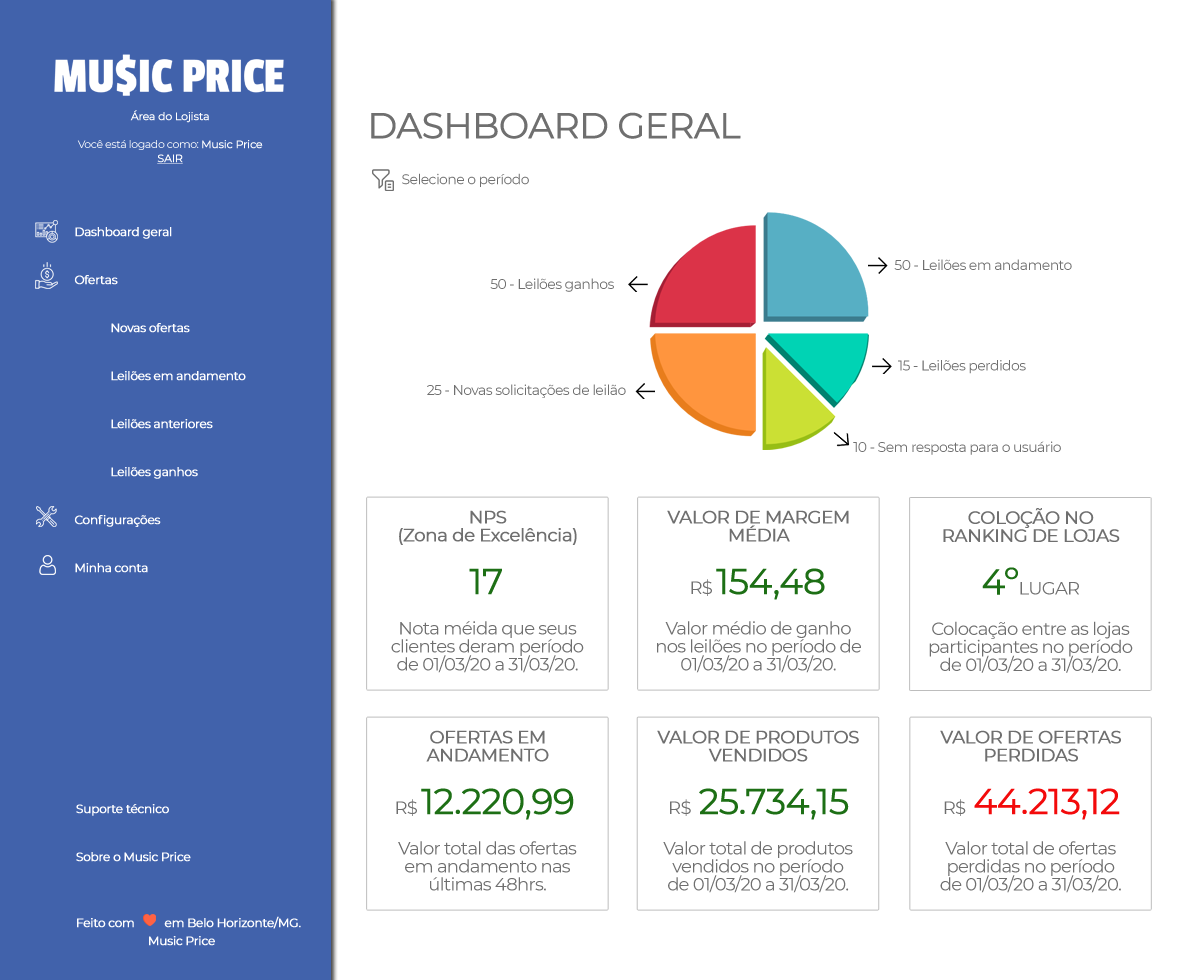
<style>
.page{position:relative;width:1200px;height:980px;background:#ffffff}
.page>*{position:absolute;margin:0}
.t1{font:11px/14px "Montserrat-Regular";letter-spacing:-0.04em;color:#ffffff}
.t2{font:11px/14px "Montserrat-Regular";letter-spacing:-0.04em;color:#ffffff;font-weight:bold}
.t3{font:11px/14px "Montserrat-Regular";letter-spacing:-0.04em;color:#ffffff;font-weight:bold;text-decoration:underline}
.t4{font:36px "Montserrat-Regular";letter-spacing:-0.04em;color:#6f6f6f;font-weight:bold}
.t5{font:14px "Montserrat-Regular";letter-spacing:-0.04em;color:#6f6f6f}
.t6{font:12px/48px "Montserrat-Regular";letter-spacing:-0.04em;color:#ffffff;font-weight:bold}
.t7{font:18px/18px "Montserrat-Regular";letter-spacing:-0.04em;color:#6f6f6f;font-weight:bold}
.t8{font:36px "Montserrat-Regular";letter-spacing:-0.04em;color:#1d6f15;font-weight:bold}
.t9{font:18px "Montserrat-Regular";letter-spacing:-0.04em;color:#6f6f6f}
.t10{font:18px/18px "Montserrat-Regular";letter-spacing:-0.04em;color:#6f6f6f}
.t11{font:36px "Montserrat-Regular";letter-spacing:-0.04em;color:#f30a0b;font-weight:bold}
.t12{font:12px/18px "Montserrat-Regular";letter-spacing:-0.04em;color:#ffffff;font-weight:bold}
</style>
<div class="page">
<p class="t1" style="left:77px;top:110px;width:186px;height:54px;text-align:center"><span class="t2">Área do Lojista<br><br></span>Você está logado como: <span class="t2">Music Price<br></span><span class="t3">SAIR</span></p>
<p class="t4" style="left:371px;top:112px;width:370px;height:27px">DASHBOARD GERAL</p>
<p class="t5" style="left:402px;top:173px;width:127px;height:14px">Selecione o período</p>
<p class="t6" style="left:74px;top:227px;width:172px;height:346px">Dashboard geral<br>Ofertas<br> Novas ofertas<br> Leilões em andamento<br> Leilões anteriores<br> Leilões ganhos<br>Configurações<br>Minha conta</p>
<p class="t5" style="left:894px;top:259px;width:178px;height:11px">50 - Leilões em andamento</p>
<p class="t5" style="left:490px;top:278px;width:124px;height:14px">50 - Leilões ganhos</p>
<p class="t5" style="left:898px;top:360px;width:128px;height:14px">15 - Leilões perdidos</p>
<p class="t5" style="left:427px;top:384px;width:199px;height:14px">25 - Novas solicitações de leilão</p>
<p class="t5" style="left:853px;top:441px;width:208px;height:14px">10 - Sem resposta para o usuário</p>
<p class="t7" style="left:399px;top:510px;width:178px;height:35px;text-align:center">NPS<br>(Zona de Excelência)</p>
<p class="t7" style="left:667px;top:510px;width:182px;height:32px;text-align:center">VALOR DE MARGEM<br>MÉDIA</p>
<p class="t7" style="left:943px;top:508px;width:177px;height:34px;text-align:center">COLOÇÃO NO<br>RANKING DE LOJAS</p>
<p class="t8" style="left:469px;top:568px;width:33px;height:27px">17</p>
<p class="t8" style="left:691px;top:568px;width:134px;height:32px"><span class="t9">R$ </span>154,48</p>
<p class="t9" style="left:982px;top:567px;width:97px;height:28px"><span class="t8">4º</span>LUGAR</p>
<p class="t10" style="left:391px;top:621px;width:193px;height:52px;text-align:center">Nota méida que seus<br>clientes deram período<br>de 01/03/20 a 31/03/20.</p>
<p class="t10" style="left:657px;top:621px;width:204px;height:52px;text-align:center">Valor médio de ganho<br>nos leilões no período de<br>01/03/20 a 31/03/20.</p>
<p class="t10" style="left:929px;top:621px;width:204px;height:52px;text-align:center">Colocação entre as lojas<br>participantes no período<br>de 01/03/20 a 31/03/20.</p>
<p class="t7" style="left:426px;top:730px;width:123px;height:32px;text-align:center">OFERTAS EM<br>ANDAMENTO</p>
<p class="t7" style="left:657px;top:730px;width:202px;height:32px;text-align:center">VALOR DE PRODUTOS<br>VENDIDOS</p>
<p class="t7" style="left:940px;top:730px;width:181px;height:32px;text-align:center">VALOR DE OFERTAS<br>PERDIDAS</p>
<p class="t8" style="left:396px;top:788px;width:178px;height:32px"><span class="t9">R$ </span>12.220,99</p>
<p class="t8" style="left:670px;top:788px;width:179px;height:32px"><span class="t9">R$  </span>25.734,15</p>
<p class="t11" style="left:944px;top:788px;width:176px;height:32px"><span class="t9">R$  </span>44.213,12</p>
<p class="t12" style="left:76px;top:804px;width:225px;height:142px"><span class="t6">Suporte técnico<br>Sobre o Music Price<br><br></span>Feito com          em Belo Horizonte/MG.<br>  Music Price</p>
<p class="t10" style="left:398px;top:841px;width:179px;height:50px;text-align:center">Valor total das ofertas<br>em andamento nas<br>últimas 48hrs.</p>
<p class="t10" style="left:663px;top:841px;width:190px;height:52px;text-align:center">Valor total de produtos<br>vendidos no período<br>de 01/03/20 a 31/03/20.</p>
<p class="t10" style="left:940px;top:841px;width:181px;height:52px;text-align:center">Valor total de ofertas<br>perdidas no período<br>de 01/03/20 a 31/03/20.</p>
</div>
